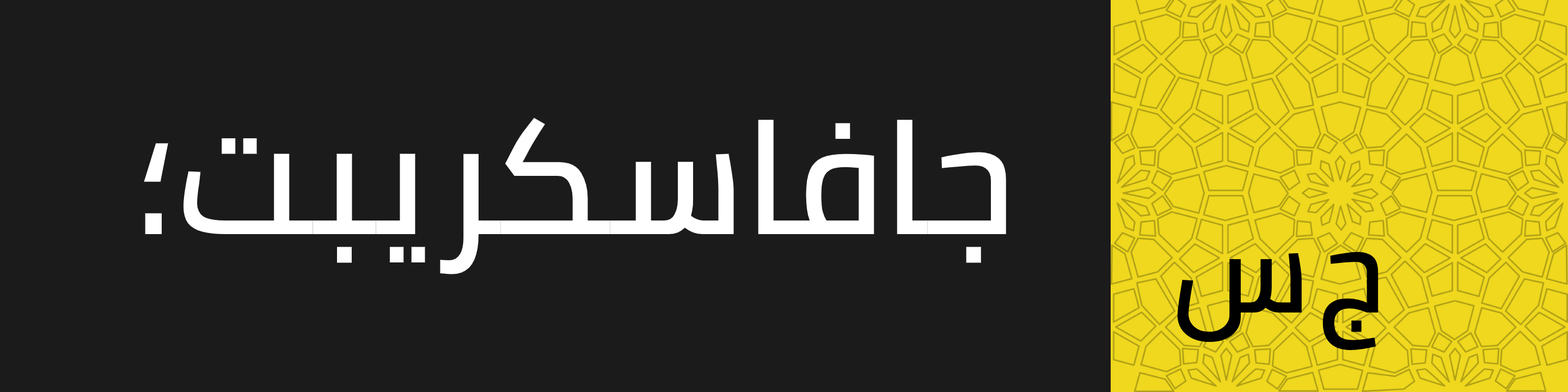
<style>
.page{position:relative;width:1568px;height:392px;background:#1c1b1b}
.page>*{position:absolute;margin:0}
.t1{font:160.6px "Cairo-SemiBold";color:#ffffff}
.t2{font:118.7px "Cairo-SemiBold";color:#000000}
</style>
<div class="page">
<p class="t1" style="left:144px;top:118px;width:862px;height:156px">جافاسكريبت؛</p>
<p class="t2" style="left:1177px;top:253px;width:125px;height:89px">س</p>
<p class="t2" style="left:1322px;top:252px;width:57px;height:98px">ج</p>
</div>
